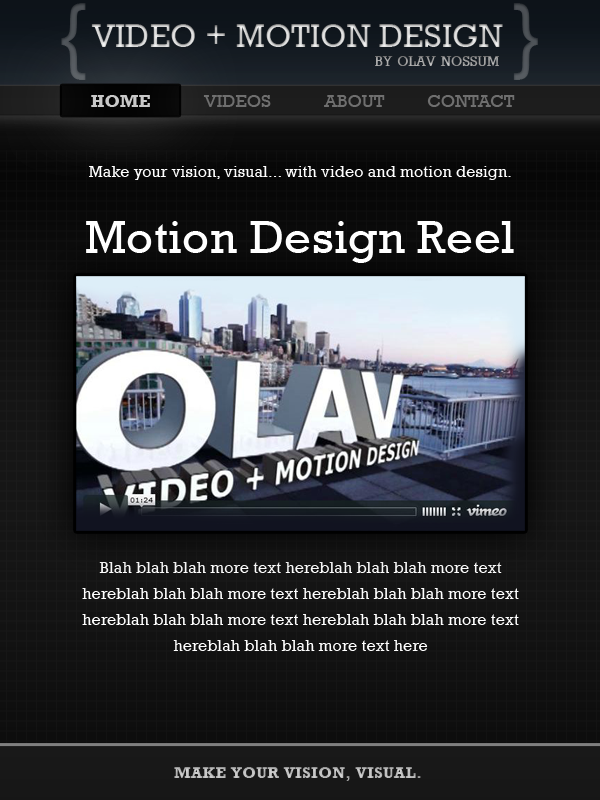
<style>
.page{position:relative;width:600px;height:800px}
.page>*{position:absolute;margin:0}
.t1{font:33.1px "Rockwell";text-transform:uppercase}
.t2{font:33.1px "Rockwell";font-variant:small-caps}
.t3{font:20.3px "Rockwell";font-variant:small-caps}
.t4{font:18px "Rockwell-Bold";color:#c8c8c8;text-transform:uppercase}
.t5{font:18px "Rockwell";color:#6f6f6f;text-transform:uppercase}
.t6{font:16px "Rockwell";letter-spacing:0.01em;color:#ffffff}
.t7{font:47px "Rockwell";letter-spacing:0.01em;color:#ffffff}
.t8{font:16px/26px "Rockwell";letter-spacing:0.01em;color:#ffffff}
.t9{font:16px "Rockwell-Bold";letter-spacing:0.02em;color:#bbbbbb;text-transform:uppercase}
</style>
<div class="page">
<p class="t1" style="left:91px;top:24px;width:412px;height:23px">Video <span class="t2">+ </span>Motion Design</p>
<p class="t3" style="left:375px;top:56px;width:124px;height:10px">by olav nossum</p>
<p class="t4" style="left:91px;top:95px;width:59px;height:12px">Home</p>
<p class="t5" style="left:203px;top:95px;width:68px;height:12px">Videos</p>
<p class="t5" style="left:324px;top:95px;width:61px;height:12px">About</p>
<p class="t5" style="left:427px;top:95px;width:88px;height:12px">Contact</p>
<p class="t6" style="left:89px;top:166px;width:422px;height:14px">Make your vision, visual... with video and motion design.</p>
<p class="t7" style="left:86px;top:221px;width:428px;height:42px">Motion Design Reel</p>
<p class="t8" style="left:82px;top:562px;width:437px;height:89px;text-align:center">Blah blah blah more text hereblah blah blah more text hereblah blah blah more text hereblah blah blah more text hereblah blah blah more text hereblah blah blah more text hereblah blah blah more text here</p>
<p class="t9" style="left:174px;top:767px;width:247px;height:14px">make your vision, visual.</p>
</div>
